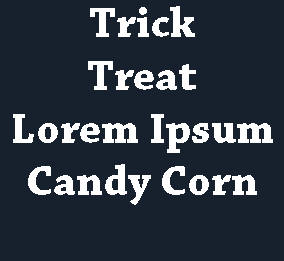
<style>
.page{position:relative;width:284px;height:261px;background:#17202d}
.page>*{position:absolute;margin:0}
.t1{font:44px "ChaparralPro-Bold";color:#ffffff}
</style>
<div class="page">
<p class="t1" style="left:13px;top:6px;width:260px;height:199px;text-align:center">Trick<br>Treat<br>Lorem Ipsum<br>Candy Corn</p>
</div>
